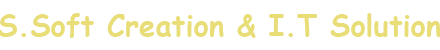
<style>
.page{position:relative;width:440px;height:50px;background:#ffffff}
.page>*{position:absolute;margin:0}
.t1{font:29.2px "ComicSansMS-Bold";color:#e8dd77}
.t2{font:29.2px "MyriadPro-Regular";color:#d02f52}
</style>
<div class="page">
<p class="t1" style="left:0px;top:13px;width:441px;height:25px"><span class="t2">     </span>S.Soft Creation &amp; I.T Solution</p>
</div>
